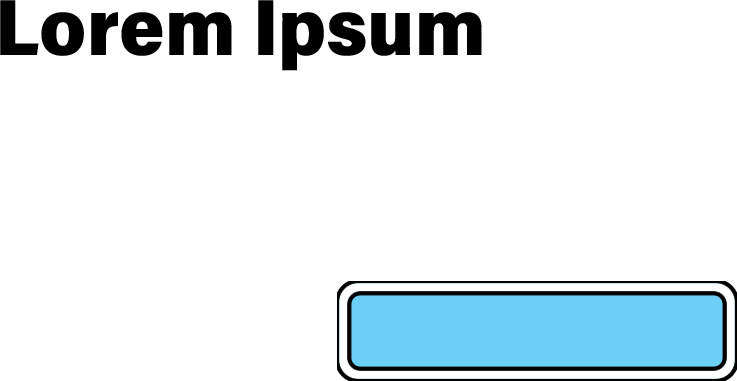
<style>
.page{position:relative;width:737px;height:381px;background:#ffffff}
.page>*{position:absolute;margin:0}
.t1{font:80px "AcuminConcept-SemiCondensedBlack";color:#000000}
</style>
<div class="page">
<p class="t1" style="left:0px;top:0px;width:482px;height:71px">Lorem Ipsum</p>
</div>
